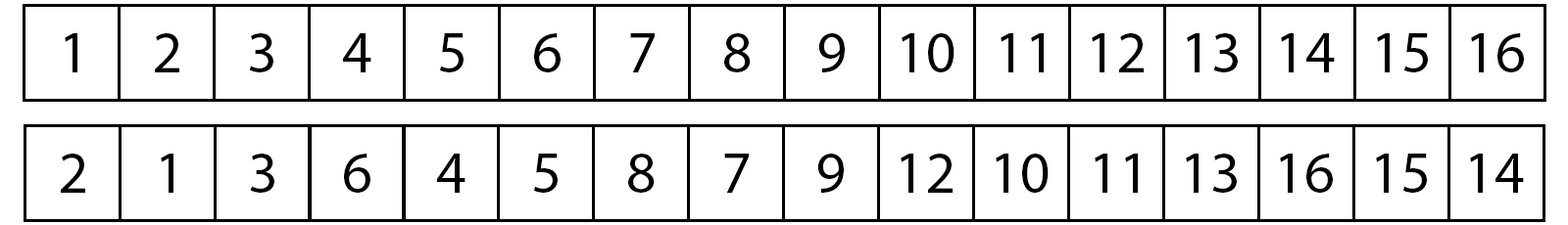
<style>
.page{position:relative;width:1568px;height:225px;background:#ffffff}
.page>*{position:absolute;margin:0}
.t1{font:58.8px "MyriadPro-Regular";color:#000000}
</style>
<div class="page">
<p class="t1" style="left:65px;top:33px;width:12px;height:40px">1</p>
<p class="t1" style="left:155px;top:33px;width:24px;height:40px">2</p>
<p class="t1" style="left:249px;top:33px;width:24px;height:40px">3</p>
<p class="t1" style="left:343px;top:33px;width:28px;height:40px">4</p>
<p class="t1" style="left:439px;top:33px;width:25px;height:40px">5</p>
<p class="t1" style="left:534px;top:33px;width:27px;height:40px">6</p>
<p class="t1" style="left:630px;top:33px;width:25px;height:40px">7</p>
<p class="t1" style="left:724px;top:33px;width:27px;height:40px">8</p>
<p class="t1" style="left:818px;top:33px;width:27px;height:40px">9</p>
<p class="t1" style="left:902px;top:33px;width:53px;height:40px">10</p>
<p class="t1" style="left:1001px;top:33px;width:43px;height:40px">11</p>
<p class="t1" style="left:1092px;top:33px;width:52px;height:40px">12</p>
<p class="t1" style="left:1187px;top:33px;width:51px;height:40px">13</p>
<p class="t1" style="left:1281px;top:33px;width:54px;height:40px">14</p>
<p class="t1" style="left:1377px;top:33px;width:51px;height:40px">15</p>
<p class="t1" style="left:1471px;top:33px;width:53px;height:40px">16</p>
<p class="t1" style="left:61px;top:154px;width:24px;height:39px">2</p>
<p class="t1" style="left:161px;top:154px;width:12px;height:39px">1</p>
<p class="t1" style="left:250px;top:154px;width:24px;height:39px">3</p>
<p class="t1" style="left:344px;top:154px;width:26px;height:39px">6</p>
<p class="t1" style="left:437px;top:154px;width:29px;height:39px">4</p>
<p class="t1" style="left:533px;top:154px;width:25px;height:39px">5</p>
<p class="t1" style="left:628px;top:154px;width:27px;height:39px">8</p>
<p class="t1" style="left:724px;top:154px;width:25px;height:39px">7</p>
<p class="t1" style="left:817px;top:154px;width:27px;height:39px">9</p>
<p class="t1" style="left:901px;top:154px;width:52px;height:39px">12</p>
<p class="t1" style="left:996px;top:154px;width:53px;height:39px">10</p>
<p class="t1" style="left:1095px;top:154px;width:43px;height:39px">11</p>
<p class="t1" style="left:1186px;top:154px;width:51px;height:39px">13</p>
<p class="t1" style="left:1280px;top:154px;width:53px;height:39px">16</p>
<p class="t1" style="left:1376px;top:154px;width:51px;height:39px">15</p>
<p class="t1" style="left:1470px;top:154px;width:54px;height:39px">14</p>
</div>
